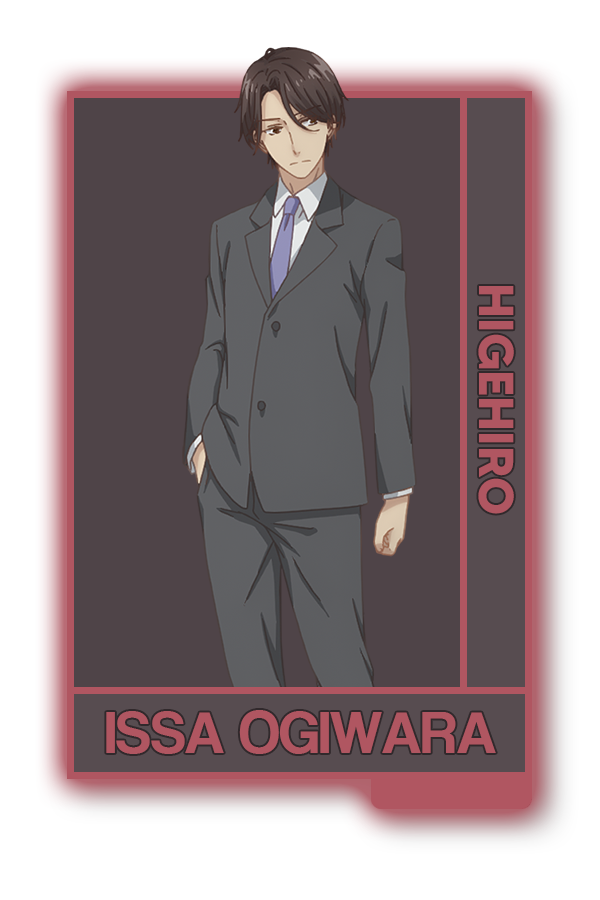
<style>
.page{position:relative;width:600px;height:900px;background:#4f4448}
.page>*{position:absolute;margin:0}
.t1{font:48.8px "MADETOMMY-Bold";color:#b05661}
.t2{font:60.7px "CoolveticaRg-Regular";color:#b05661}
</style>
<div class="page">
<p class="t1" style="left:478px;top:286px;width:36px;height:228px;rotate:90deg">HIGEHIRO</p>
<p class="t2" style="left:106px;top:710px;width:390px;height:44px">ISSA OGIWARA</p>
</div>
